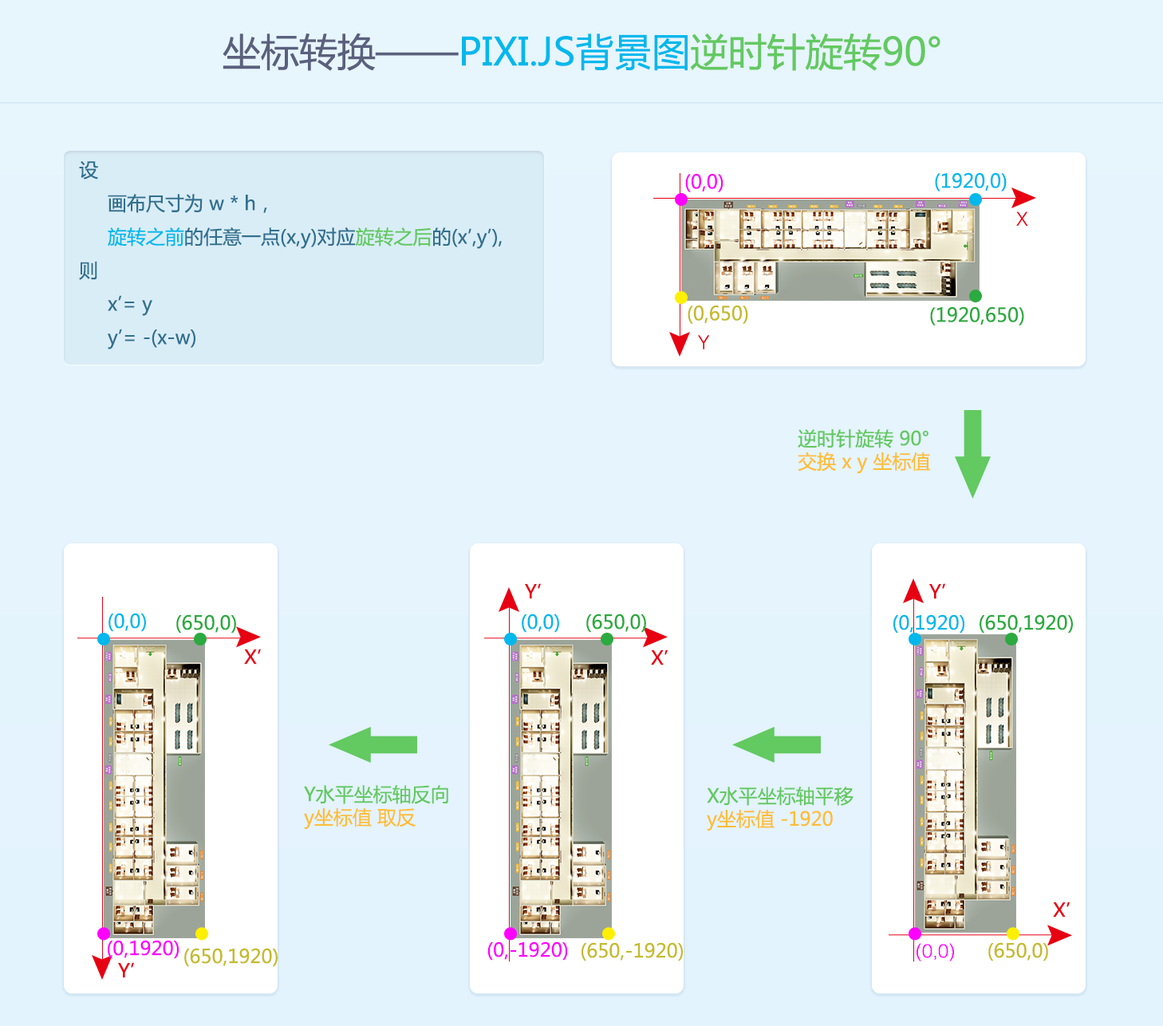
<style>
.page{position:relative;width:1163px;height:1026px}
.page>*{position:absolute;margin:0}
.t1{font:38.3px "MicrosoftYaHei";color:#00b8ec}
.t2{font:38.3px "MicrosoftYaHei";color:#5a607d}
.t3{font:38.3px "MicrosoftYaHei";color:#63c961}
.t4{font:19.1px/33.5px "MicrosoftYaHei";color:#31708f}
.t5{font:19.1px/33.5px "MicrosoftYaHei";color:#00b8ec}
.t6{font:19.1px/33.5px "MicrosoftYaHei";color:#63c961}
.t7{font:19.1px "MicrosoftYaHei";color:#ff00ff}
.t8{font:19.1px "MicrosoftYaHei";color:#00b8ec}
.t9{font:19.1px "FZZDXK--GBK1-0";color:#e60012}
.t10{font:19.1px "MicrosoftYaHei";color:#c5bb2d}
.t11{font:19.1px "MicrosoftYaHei";color:#2baa3f}
.t12{font:19.1px "MicrosoftYaHei";color:#ffbd36}
.t13{font:19.1px "MicrosoftYaHei";color:#63c961}
.t14{font:18.9px "MicrosoftYaHei";color:#e60012;scale:1.04 1}
.t15{font:18.9px "MicrosoftYaHei";color:#00b8ec}
.t16{font:18.9px "MicrosoftYaHei";color:#2baa3f}
.t17{font:18.9px "MicrosoftYaHei";color:#ff00ff}
.t18{font:18.9px "MicrosoftYaHei";color:#c5bb2d}
.t19{font:18.9px "FZZDXK--GBK1-0";color:#ff00ff}
</style>
<div class="page">
<p class="t1" style="left:222px;top:33px;width:718px;height:38px"><span class="t2">坐标转换——</span>PIXI.JS背景图<span class="t3">逆时针旋转90°</span></p>
<p class="t4" style="left:79px;top:161px;width:423px;height:188px">设<br> 画布尺寸为 w * h，<br>     <span class="t5">旋转之前</span>的任意一点(x,y)对应<span class="t6">旋转之后</span>的(x’,y’),<br>则<br> x’= y<br> y’= -(x-w)</p>
<p class="t7" style="left:685px;top:173px;width:38px;height:19px">(0,0)</p>
<p class="t8" style="left:935px;top:172px;width:71px;height:19px">(1920,0)</p>
<p class="t9" style="left:1016px;top:211px;width:12px;height:15px">X</p>
<p class="t10" style="left:687px;top:305px;width:61px;height:19px">(0,650)</p>
<p class="t11" style="left:930px;top:306px;width:94px;height:19px">(1920,650)</p>
<p class="t9" style="left:698px;top:335px;width:12px;height:14px">Y</p>
<p class="t12" style="left:797px;top:429px;width:134px;height:45px"><span class="t13">逆时针旋转 90°<br></span>交换 x y 坐标值</p>
<p class="t14" style="left:525px;top:583px;width:16px;height:16px">Y’</p>
<p class="t14" style="left:929px;top:583px;width:16px;height:16px">Y’</p>
<p class="t15" style="left:108px;top:612px;width:38px;height:20px">(0,0)</p>
<p class="t16" style="left:176px;top:614px;width:60px;height:19px">(650,0)</p>
<p class="t15" style="left:522px;top:613px;width:37px;height:19px">(0,0)</p>
<p class="t16" style="left:586px;top:613px;width:60px;height:19px">(650,0)</p>
<p class="t15" style="left:893px;top:614px;width:71px;height:19px">(0,1920)</p>
<p class="t16" style="left:979px;top:614px;width:94px;height:19px">(650,1920)</p>
<p class="t14" style="left:244px;top:648px;width:17px;height:16px">X’</p>
<p class="t14" style="left:651px;top:649px;width:16px;height:16px">X’</p>
<p class="t13" style="left:304px;top:785px;width:144px;height:44px">Y水平坐标轴反向<br><span class="t12">y坐标值 取反</span></p>
<p class="t12" style="left:707px;top:786px;width:146px;height:45px"><span class="t13">X水平坐标轴平移<br></span>y坐标值 -1920</p>
<p class="t14" style="left:1053px;top:901px;width:16px;height:16px">X’</p>
<p class="t17" style="left:108px;top:939px;width:71px;height:20px">(0,1920)</p>
<p class="t17" style="left:487px;top:941px;width:81px;height:19px">(0,-1920)</p>
<p class="t18" style="left:581px;top:942px;width:102px;height:19px">(650,-1920)</p>
<p class="t18" style="left:988px;top:942px;width:60px;height:19px">(650,0)</p>
<p class="t18" style="left:184px;top:947px;width:94px;height:20px">(650,1920)</p>
<p class="t19" style="left:916px;top:943px;width:38px;height:18px">(0,0)</p>
<p class="t14" style="left:118px;top:962px;width:16px;height:16px">Y’</p>
</div>
